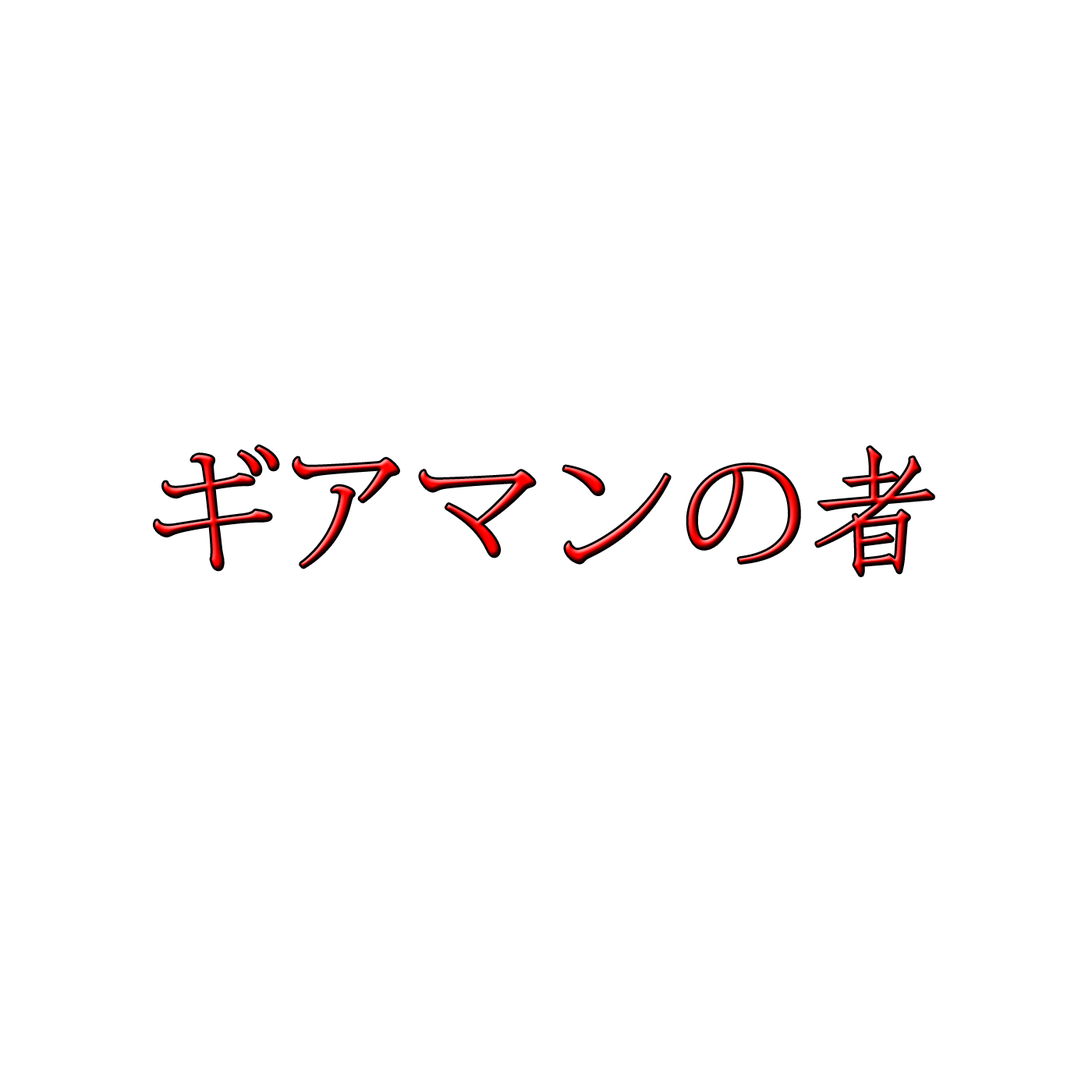
<style>
.page{position:relative;width:1092px;height:1092px;background:#ffffff}
.page>*{position:absolute;margin:0}
.t1{font:132.6px "AdobeFangsongStd-Regular"}
</style>
<div class="page">
<p class="t1" style="left:155px;top:446px;width:778px;height:129px">ギアマンの者</p>
</div>
